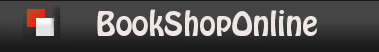
<style>
.page{position:relative;width:379px;height:52px;background:#454545}
.page>*{position:absolute;margin:0}
.t1{font:30px "HoboStd";color:#f0e6e6}
</style>
<div class="page">
<p class="t1" style="left:97px;top:9px;width:220px;height:27px">BookShopOnline</p>
</div>
